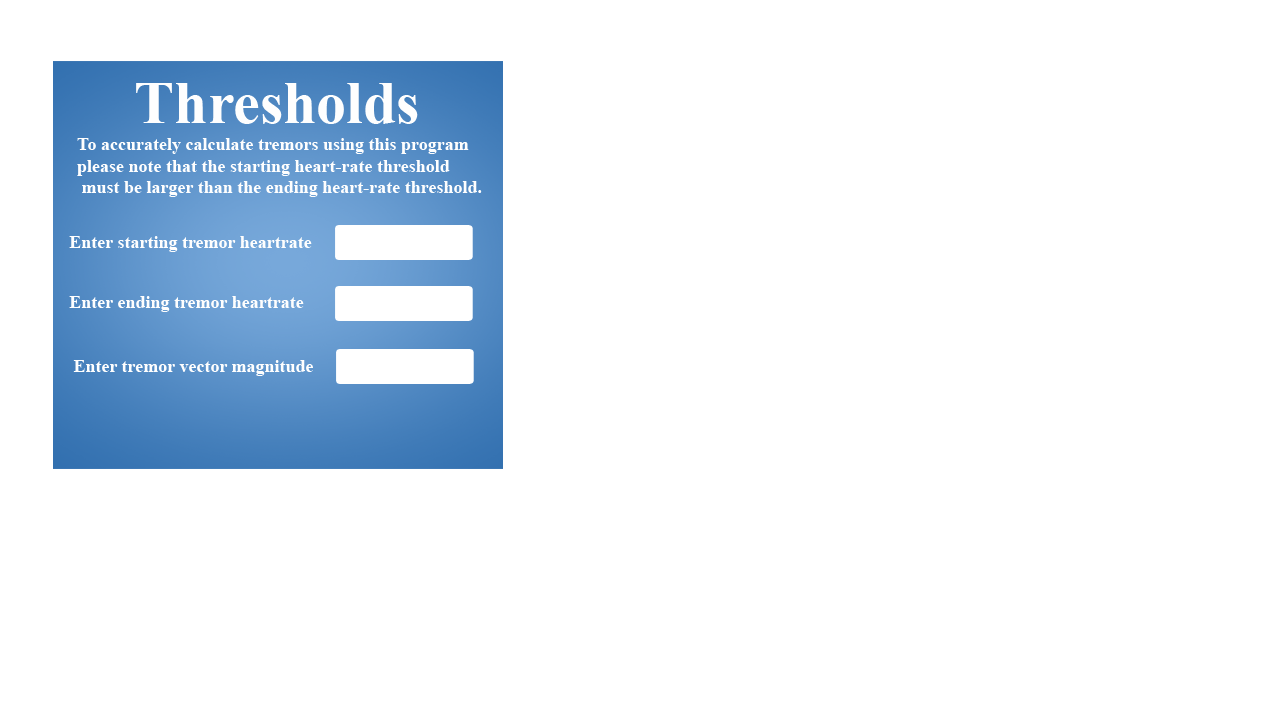
<style>
.page{position:relative;width:1268px;height:720px;background:#ffffff}
.page>*{position:absolute;margin:0}
.t1{font:60px "TimesNewRomanPS-BoldMT";color:#fefefe}
.t2{font:18px "TimesNewRomanPS-BoldMT";color:#fefefe}
</style>
<div class="page">
<p class="t1" style="left:136px;top:83px;width:282px;height:41px">Thresholds</p>
<p class="t2" style="left:77px;top:138px;width:405px;height:59px">To accurately calculate tremors using this program <br>please note that the starting heart-rate threshold<br> must be larger than the ending heart-rate threshold.</p>
<p class="t2" style="left:69px;top:236px;width:243px;height:16px">Enter starting tremor heartrate</p>
<p class="t2" style="left:69px;top:296px;width:235px;height:16px">Enter ending tremor heartrate</p>
<p class="t2" style="left:73px;top:360px;width:240px;height:16px">Enter tremor vector magnitude</p>
</div>
